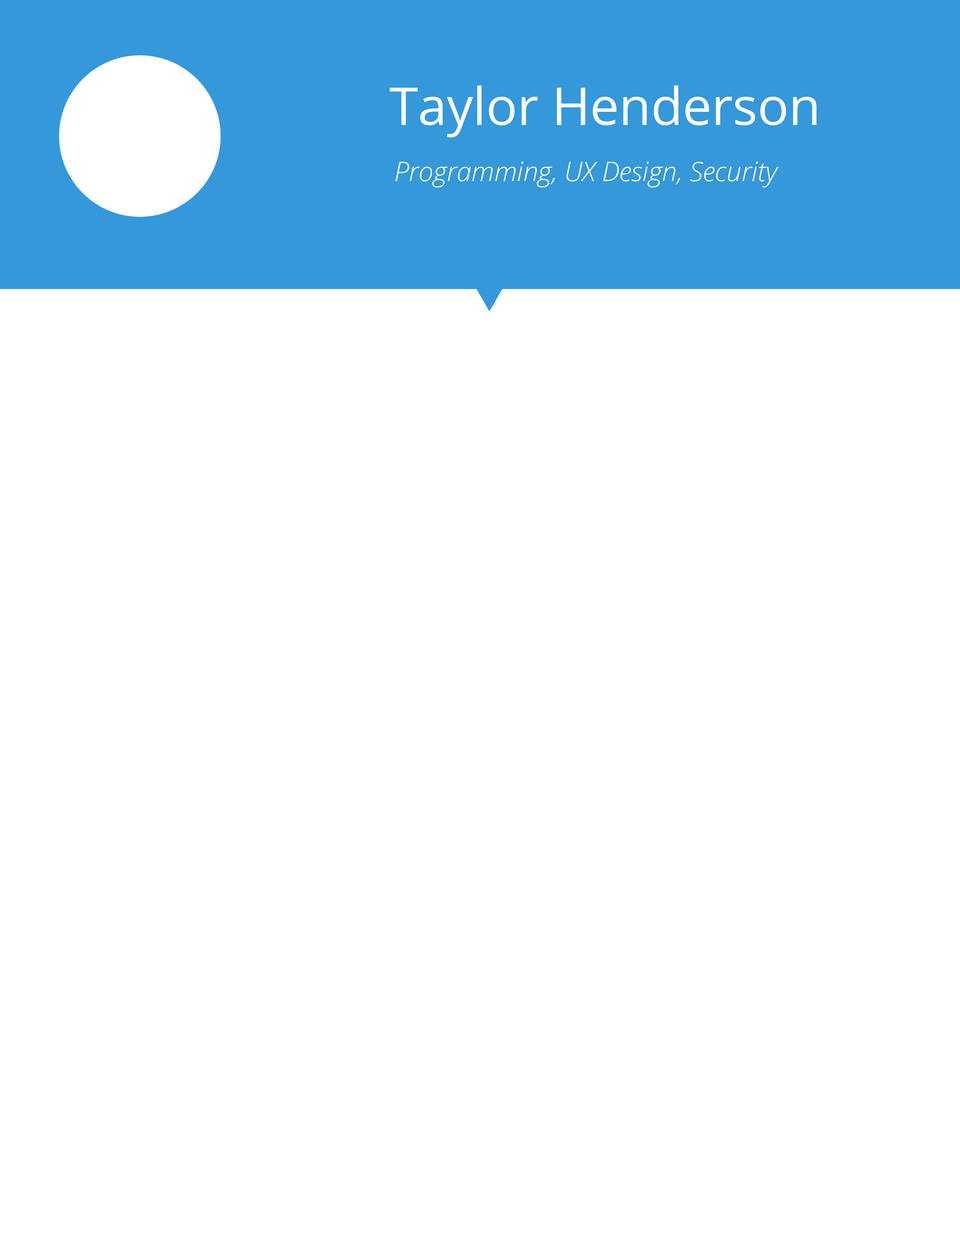
<style>
.page{position:relative;width:960px;height:1242px;background:#ffffff}
.page>*{position:absolute;margin:0}
.t1{font:51.8px "OpenSans";color:#ffffff}
.t2{font:26.7px "OpenSansLight-Italic";color:#ffffff}
</style>
<div class="page">
<p class="t1" style="left:390px;top:85px;width:426px;height:52px">Taylor Henderson</p>
<p class="t2" style="left:395px;top:161px;width:383px;height:26px">Programming, UX Design, Security</p>
</div>
